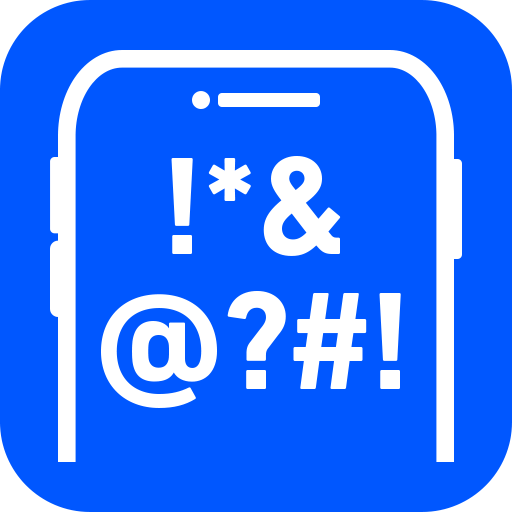
<style>
.page{position:relative;width:512px;height:512px;background:#0057ff}
.page>*{position:absolute;margin:0}
.t1{font:141.8px/134.6px "DINNextW1G-Bold";color:#ffffff}
</style>
<div class="page">
<p class="t1" style="left:101px;top:156px;width:300px;height:252px;text-align:center">!*&amp;<br>@?#!</p>
</div>
